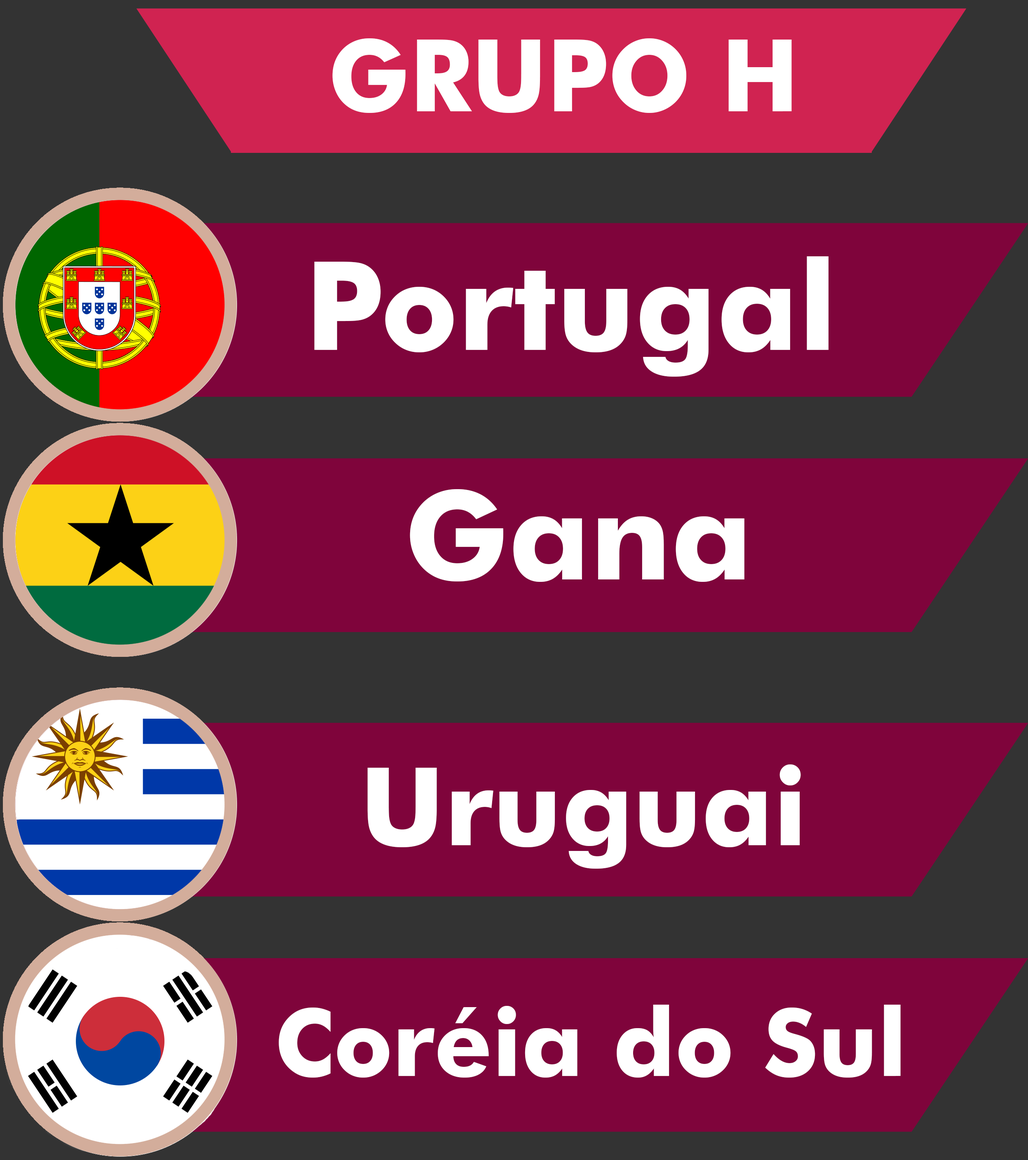
<style>
.page{position:relative;width:1028px;height:1160px;background:#7f043b}
.page>*{position:absolute;margin:0}
.t1{font:100.5px "FuturaBT-Bold";color:#ffffff;scale:0.96 1}
.t2{font:123.6px "FuturaBT-Bold";color:#ffffff}
.t3{font:108.5px "FuturaBT-Bold";color:#ffffff}
.t4{font:94.2px "FuturaBT-Bold";color:#ffffff}
</style>
<div class="page">
<p class="t1" style="left:332px;top:38px;width:460px;height:75px">GRUPO H</p>
<p class="t2" style="left:314px;top:256px;width:514px;height:121px">Portugal</p>
<p class="t2" style="left:410px;top:489px;width:334px;height:93px">Gana</p>
<p class="t3" style="left:367px;top:764px;width:434px;height:105px">Uruguai</p>
<p class="t4" style="left:279px;top:1005px;width:621px;height:73px">Coréia do Sul</p>
</div>
